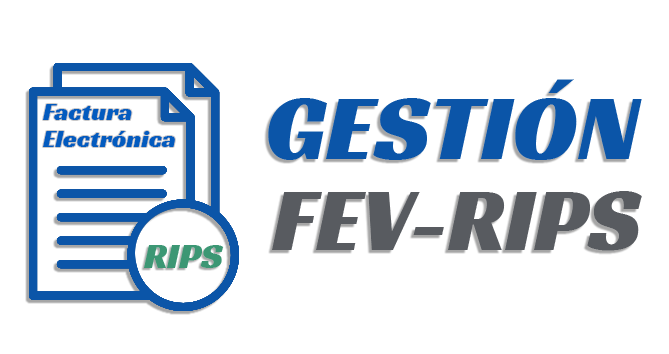
<style>
.page{position:relative;width:669px;height:354px;background:#ffffff}
.page>*{position:absolute;margin:0}
.t1{font:95.2px "RacingSansOne-Regular";color:#0b55a8}
.t2{font:25.3px "RacingSansOne-Regular";color:#035bbf}
.t3{font:89.7px "RacingSansOne-Regular";color:#585b60}
.t4{font:36.7px "RacingSansOne-Regular";color:#3c9774}
</style>
<div class="page">
<p class="t1" style="left:268px;top:79px;width:374px;height:81px">GESTIÓN</p>
<p class="t2" style="left:43px;top:104px;width:132px;height:43px">Factura Electrónica</p>
<p class="t3" style="left:272px;top:191px;width:370px;height:60px">FEV-RIPS</p>
<p class="t4" style="left:144px;top:245px;width:80px;height:23px">RIPS</p>
</div>
